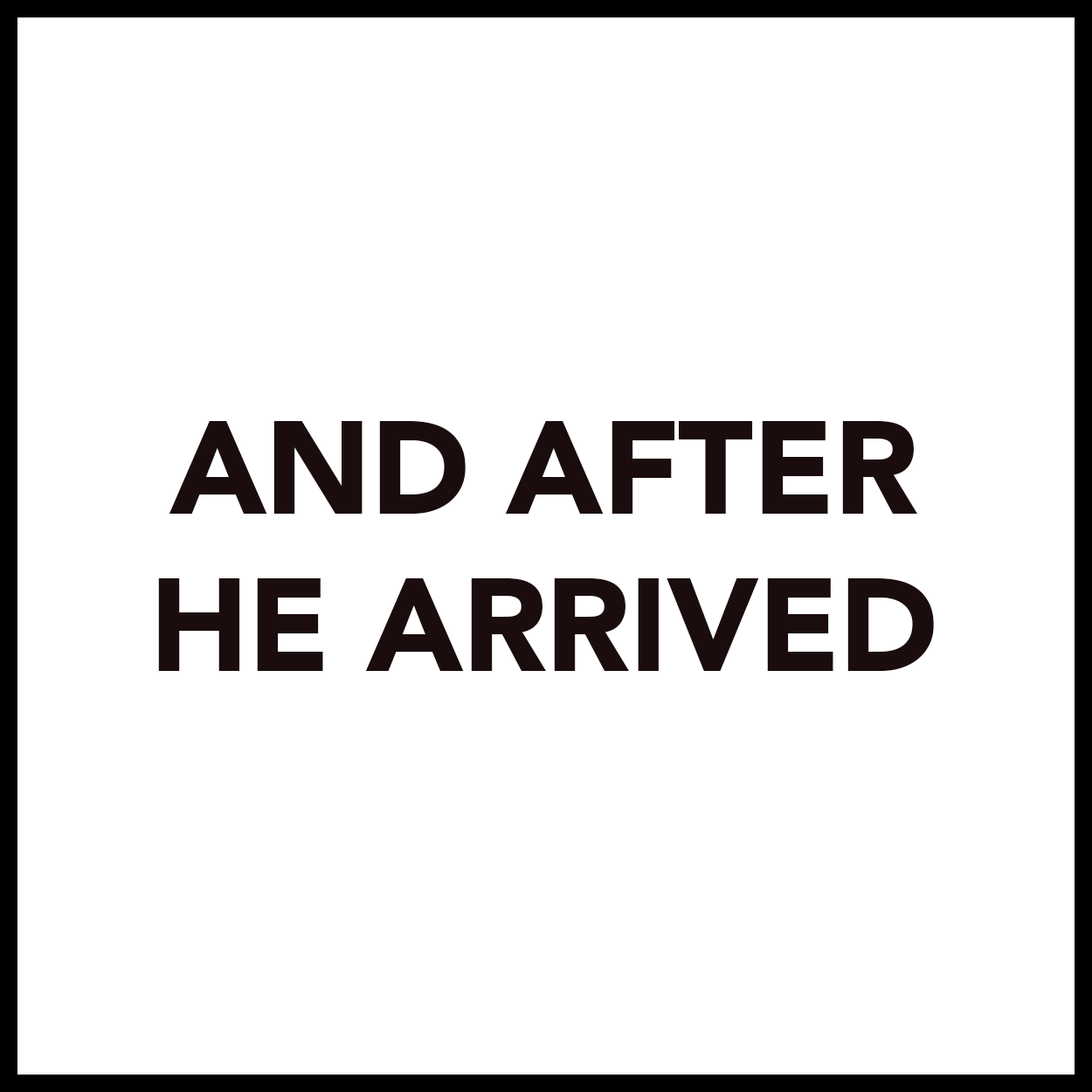
<style>
.page{position:relative;width:1092px;height:1092px;background:#ffffff}
.page>*{position:absolute;margin:0}
.t1{font:131px "Avenir-Black";letter-spacing:-0.01em;color:#1b0d0d}
</style>
<div class="page">
<p class="t1" style="left:158px;top:421px;width:776px;height:250px;text-align:center">AND AFTER<br>HE ARRIVED</p>
</div>
